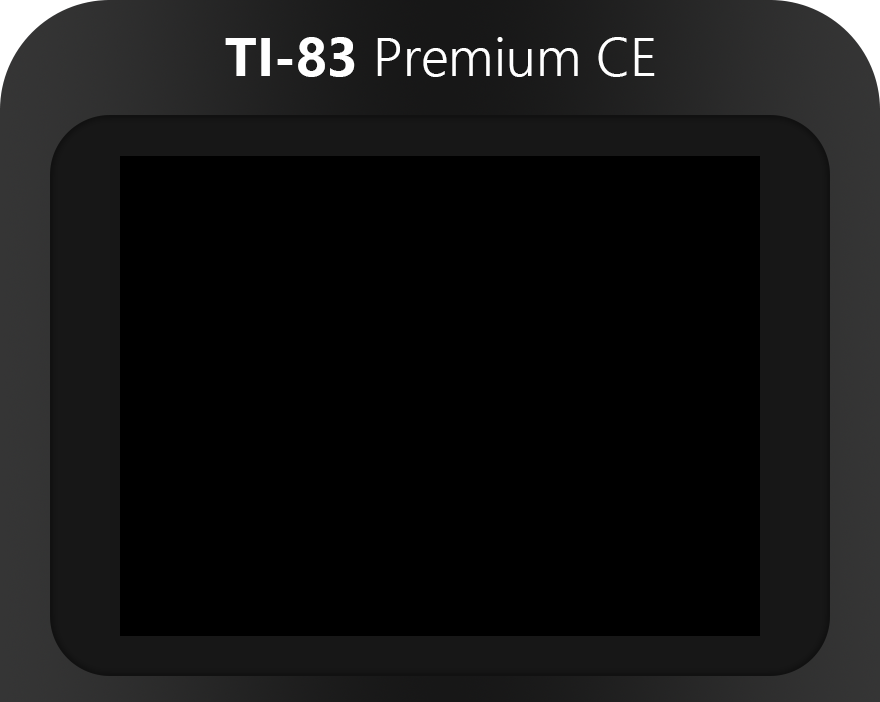
<style>
.page{position:relative;width:880px;height:702px;background:#000000}
.page>*{position:absolute;margin:0}
.t1{font:54.2px "SegoeUI-Semilight";color:#ffffff}
.t2{font:54.2px "SegoeUI-Bold";color:#ffffff}
</style>
<div class="page">
<p class="t1" style="left:225px;top:37px;width:430px;height:40px"><span class="t2">TI-83 </span>Premium CE</p>
</div>
